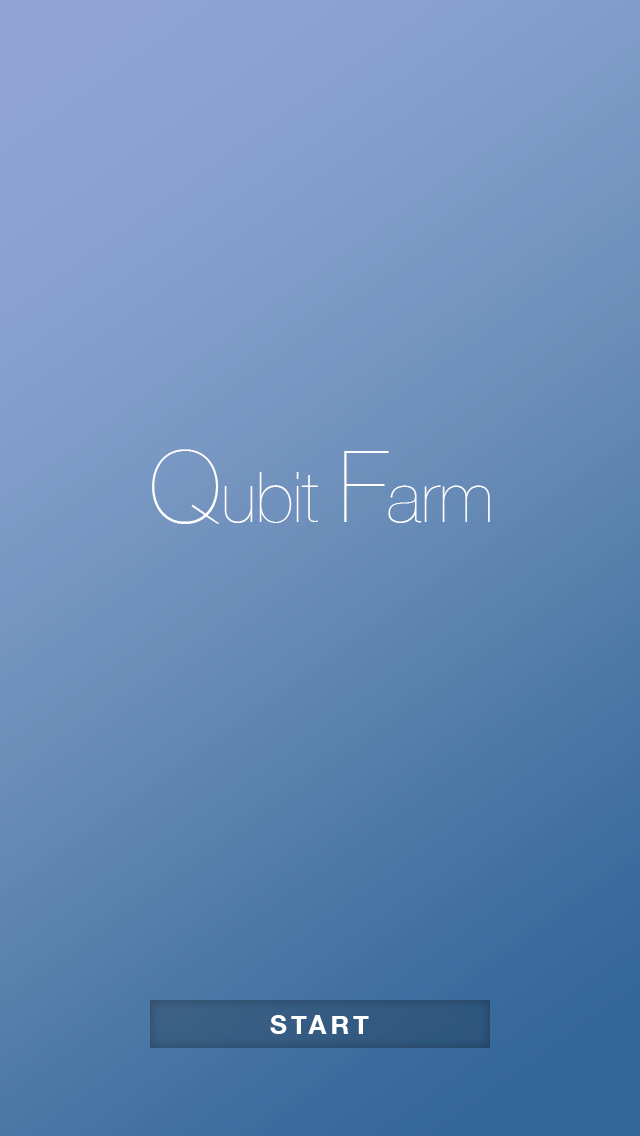
<style>
.page{position:relative;width:640px;height:1136px}
.page>*{position:absolute;margin:0}
.t1{font:70px "HelveticaNeue-UltraLight";color:#ffffff}
.t2{font:100px "HelveticaNeue-UltraLight";color:#ffffff}
.t3{font:70px "HelveticaNeue-UltraLight";letter-spacing:0.28em;color:#ffffff}
.t4{font:26px "HelveticaNeue-Bold";letter-spacing:0.16em;color:#ffffff}
</style>
<div class="page">
<p class="t1" style="left:152px;top:449px;width:338px;height:75px"><span class="t2">Q</span>ubi<span class="t3">t</span><span class="t2">F</span>arm</p>
<p class="t4" style="left:270px;top:1015px;width:99px;height:19px">START</p>
</div>
